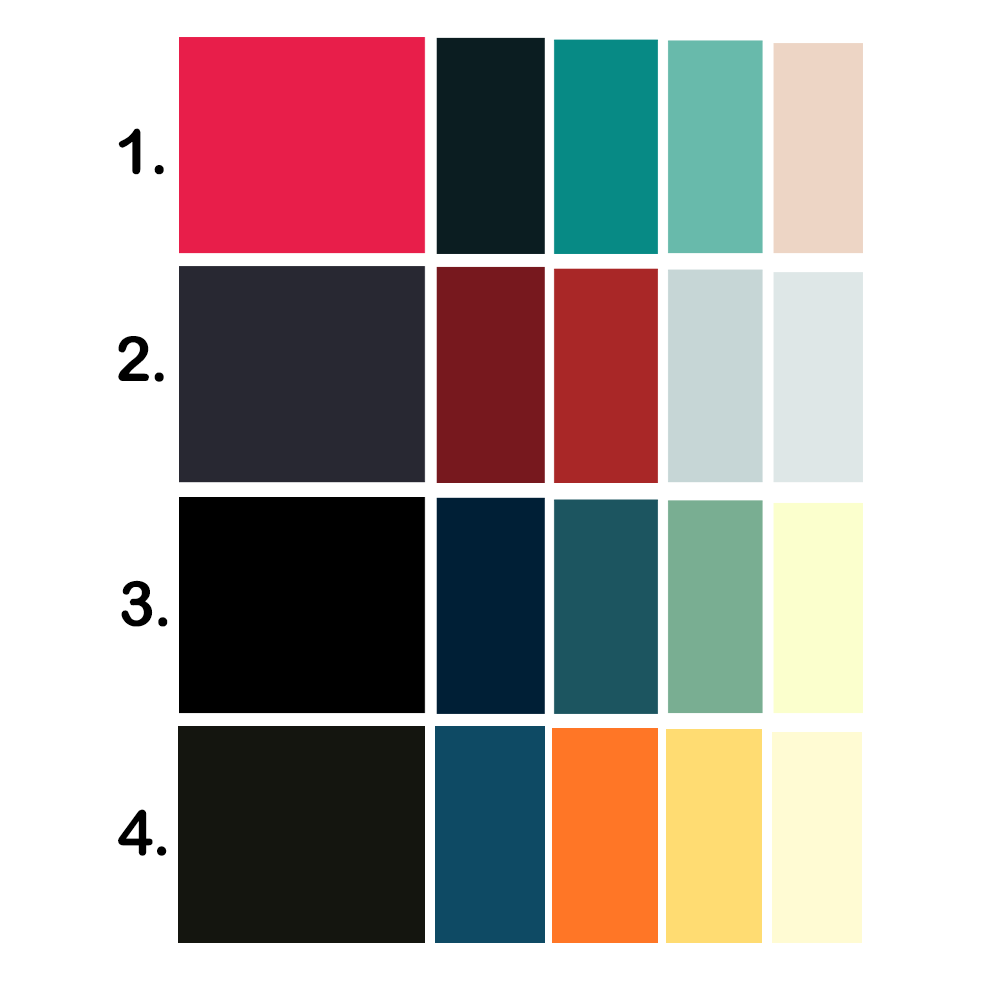
<style>
.page{position:relative;width:1000px;height:1000px;background:#ffffff}
.page>*{position:absolute;margin:0}
.t1{font:62.2px "ArialRoundedMTBold";letter-spacing:-0.025em;color:#000000}
</style>
<div class="page">
<p class="t1" style="left:118px;top:128px;width:46px;height:47px">1.</p>
<p class="t1" style="left:118px;top:336px;width:46px;height:46px">2.</p>
<p class="t1" style="left:121px;top:580px;width:47px;height:47px">3.</p>
<p class="t1" style="left:118px;top:809px;width:49px;height:47px">4.</p>
</div>
